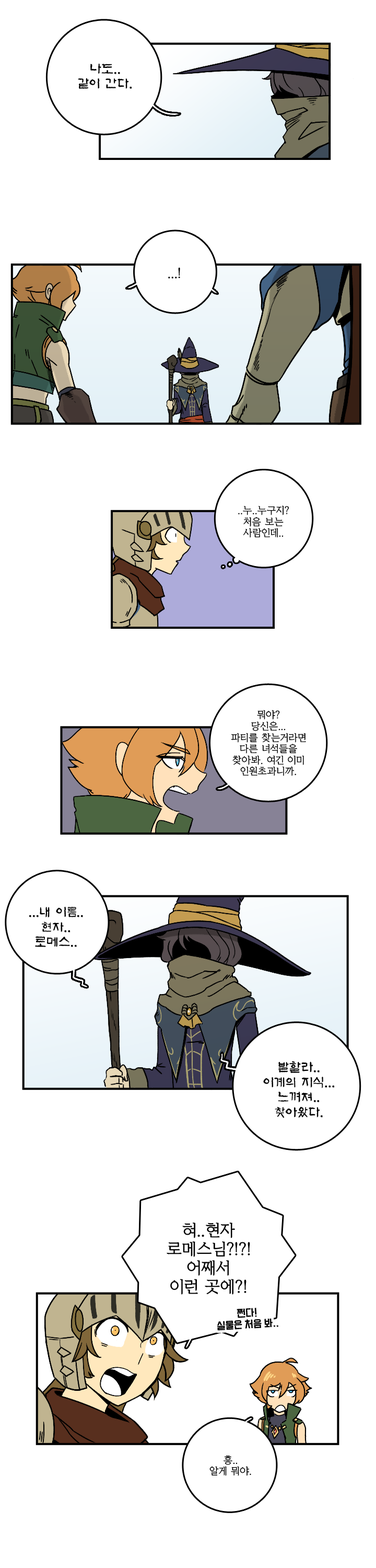
<style>
.page{position:relative;width:376px;height:1568px;background:#ffffff}
.page>*{position:absolute;margin:0}
.t1{font:12.5px "KoreanAS-R";color:#000000}
.t2{font:12.5px "KoreanYMJ-B";color:#000000}
.t3{font:9.4px "KoreanYMJ-B";color:#000000}
.t4{font:15.7px "KoreanYMJ-B";color:#000000}
.t5{font:9.4px "TTComsetakR";color:#000000}
</style>
<div class="page">
<p class="t1" style="left:78px;top:63px;width:54px;height:26px;text-align:center">나도..<br>같이 간다.</p>
<p class="t2" style="left:168px;top:268px;width:12px;height:11px">...!</p>
<p class="t3" style="left:238px;top:505px;width:51px;height:33px;text-align:center">..누..누구지?<br>처음 보는<br>사람인데..</p>
<p class="t3" style="left:231px;top:710px;width:75px;height:66px;text-align:center">뭐야?<br>당신은...<br>파티를 찾는거라면<br>다른 녀석들을<br>찾아봐. 여긴 이미<br>인원초과니까.</p>
<p class="t1" style="left:29px;top:906px;width:54px;height:41px;text-align:center">...내 이름..<br>현자..<br>로메스..</p>
<p class="t1" style="left:263px;top:1061px;width:72px;height:57px;text-align:center">발할라..<br>이계의 지식...<br>느껴져..<br>찾아왔다.</p>
<p class="t4" style="left:167px;top:1223px;width:83px;height:72px;text-align:center">혀..현자<br>로메스님?!?!<br>어째서<br>이런 곳에?!</p>
<p class="t5" style="left:217px;top:1308px;width:62px;height:23px;text-align:center;rotate:-3deg">쩐다!<br>실물은 처음 봐..</p>
<p class="t3" style="left:210px;top:1455px;width:41px;height:21px;text-align:center">흥..<br>알게 뭐야.</p>
</div>
